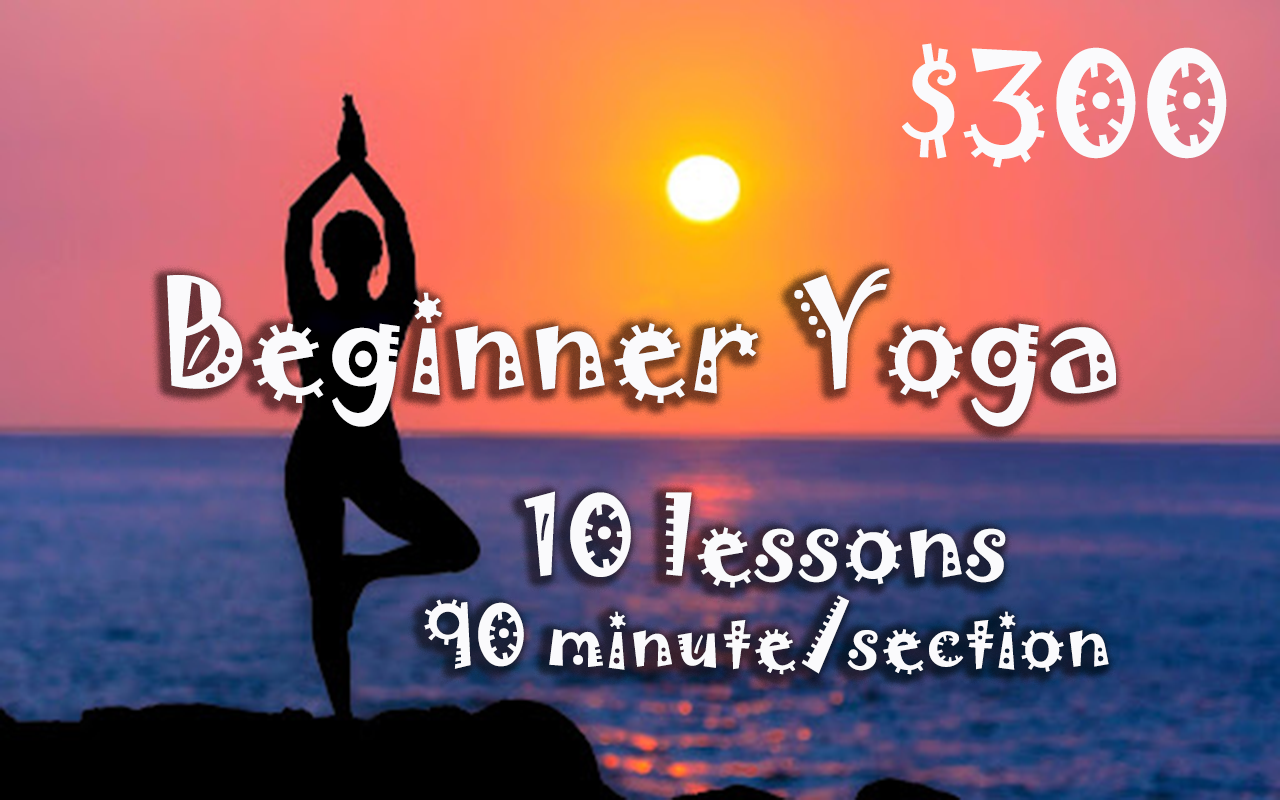
<style>
.page{position:relative;width:1280px;height:800px}
.page>*{position:absolute;margin:0}
.t1{font:129.9px "Jokerman-Regular";letter-spacing:0.005em;color:#fafafc}
.t2{font:132.2px "Jokerman-Regular";letter-spacing:0.005em;color:#fafafc}
.t3{font:74.6px "Jokerman-Regular";letter-spacing:0.005em;color:#fafafc}
.t4{font:124.4px "Jokerman-Regular";letter-spacing:0.005em;color:#fafafc}
.t5{font:99.5px "Jokerman-Regular";letter-spacing:0.005em;color:#fafafc}
</style>
<div class="page">
<p class="t1" style="left:902px;top:43px;width:325px;height:125px">$300</p>
<p class="t2" style="left:167px;top:268px;width:949px;height:159px">Beginner Yoga</p>
<p class="t3" style="left:424px;top:491px;width:685px;height:184px;text-align:center"><span class="t4"> <br></span><span class="t5">10 lessons<br></span>90 minute/section</p>
</div>
